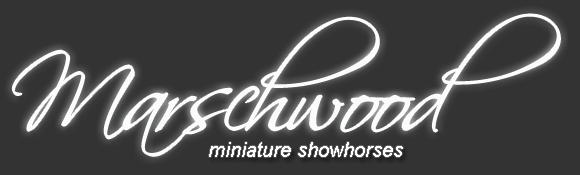
<style>
.page{position:relative;width:580px;height:175px;background:#333333}
.page>*{position:absolute;margin:0}
.t1{font:100px "Scriptina";color:#fbfbfb}
.t2{font:20px "Arial-ItalicMT";color:#fbfbfb}
</style>
<div class="page">
<p class="t1" style="left:12px;top:14px;width:548px;height:142px">Marschwood</p>
<p class="t2" style="left:209px;top:142px;width:194px;height:15px">miniature showhorses</p>
</div>
